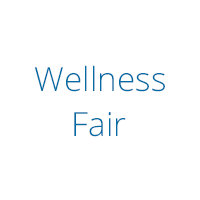
<style>
.page{position:relative;width:200px;height:200px;background:#ffffff}
.page>*{position:absolute;margin:0}
.t1{font:33.3px "OpenSans-Light";color:#006ba4}
</style>
<div class="page">
<p class="t1" style="left:34px;top:65px;width:131px;height:27px">Wellness</p>
<p class="t1" style="left:74px;top:112px;width:52px;height:25px">Fair</p>
</div>
